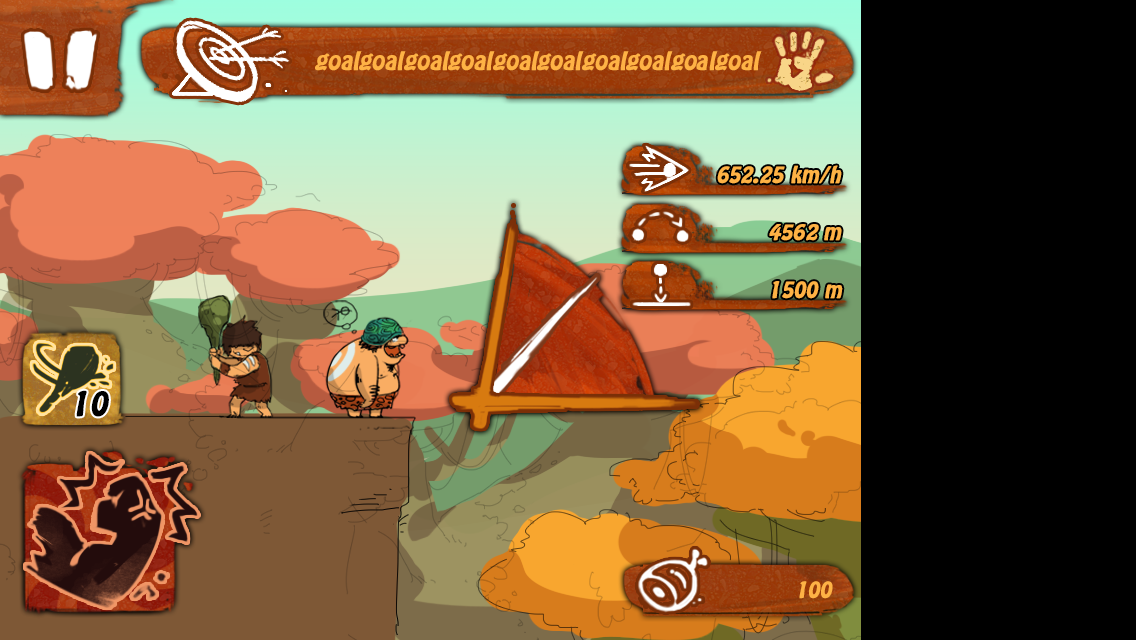
<style>
.page{position:relative;width:1136px;height:640px;background:#000000}
.page>*{position:absolute;margin:0}
.t1{font:22px "HoboStd";color:#feb245;font-weight:bold;font-style:italic}
.t2{font:20.2px "HoboStd";color:#feb245;font-weight:bold;font-style:italic}
.t3{font:19.3px "HoboStd";color:#feb245;font-weight:bold;font-style:italic;scale:1.05 1}
.t4{font:30px "HoboStd";color:#000000;font-weight:bold;font-style:italic}
.t5{font:19.9px "HoboStd";color:#feb245;font-weight:bold;font-style:italic}
</style>
<div class="page">
<p class="t1" style="left:315px;top:51px;width:447px;height:20px">goalgoalgoalgoalgoalgoalgoalgoalgoalgoal</p>
<p class="t2" style="left:717px;top:165px;width:125px;height:19px">652.25 km/h</p>
<p class="t3" style="left:769px;top:224px;width:73px;height:17px">4562 m</p>
<p class="t2" style="left:772px;top:281px;width:71px;height:18px">1500 m</p>
<p class="t4" style="left:76px;top:390px;width:33px;height:27px">10</p>
<p class="t5" style="left:799px;top:581px;width:34px;height:18px">100</p>
</div>
